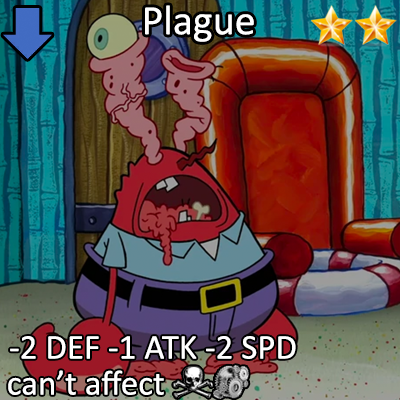
<style>
.page{position:relative;width:400px;height:400px}
.page>*{position:absolute;margin:0}
.t1{font:72px "Calibri";color:#ffffff}
.t2{font:60px/36px "Calibri";color:#ffffff}
</style>
<div class="page">
<p class="t1" style="left:145px;top:5px;width:109px;height:37px">Plague</p>
<p class="t2" style="left:8px;top:336px;width:288px;height:59px;text-align:center">-2 DEF -1 ATK -2 SPD<br>can’t affect</p>
</div>
